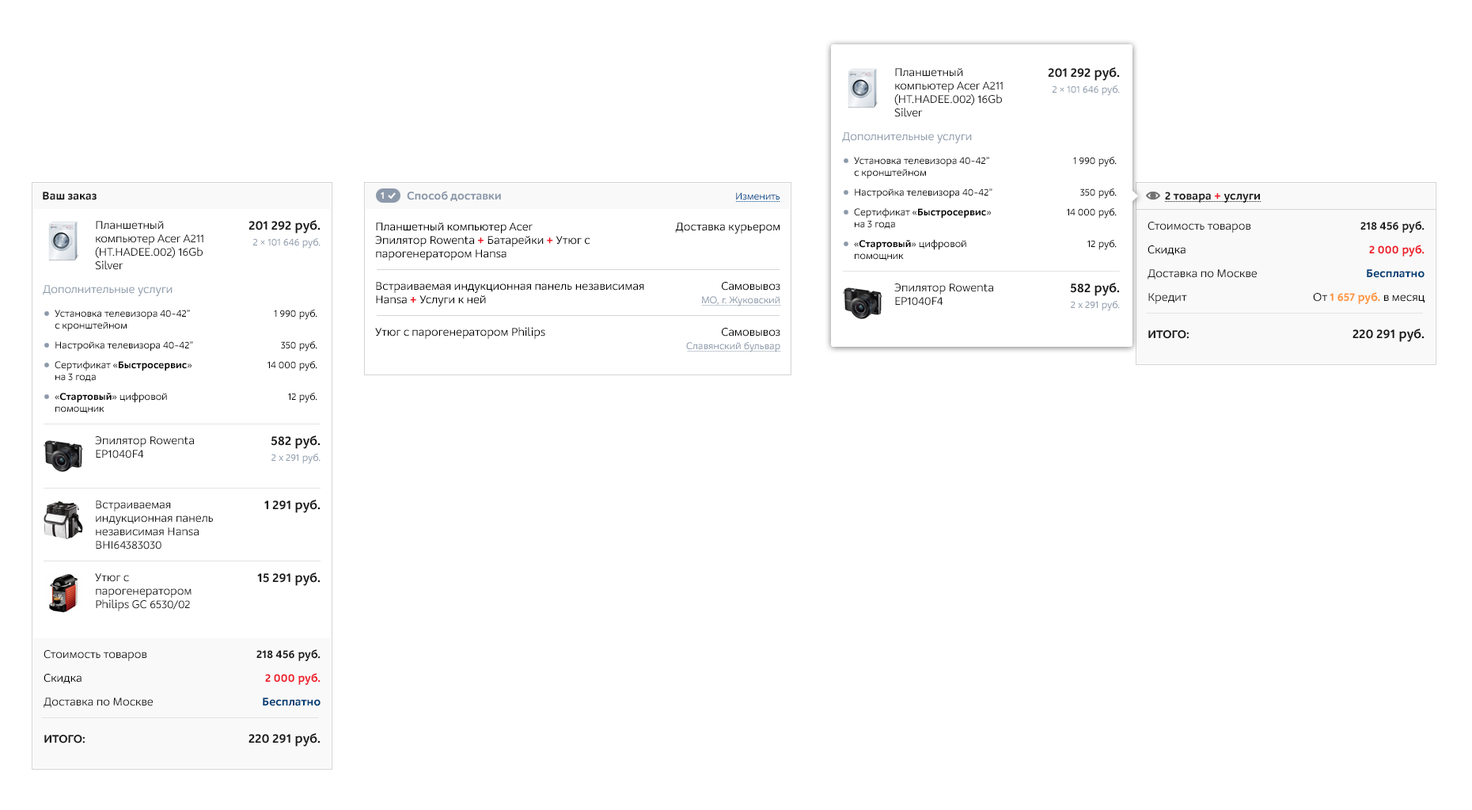
<style>
.page{position:relative;width:1472px;height:810px;background:#ffffff}
.page>*{position:absolute;margin:0}
.t1{font:11.9px/13.5px "M.Video-Regular";color:#1b1b1b}
.t2{font:13.5px "M.Video-Bold";color:#1b1b1b}
.t3{font:10.3px "M.Video-Regular";color:#8c99aa}
.t4{font:11.9px "M.Video-Regular";color:#8c99aa}
.t5{font:10.3px/11.9px "M.Video-Regular";color:#000000}
.t6{font:10.3px/11.9px "M.Video-Bold";color:#000000}
.t7{font:11.9px "M.Video-Bold";color:#1b1b1b}
.t8{font:10.3px "M.Video-Bold";color:#ffffff}
.t9{font:11.9px "M.Video-Bold";color:#8c99aa}
.t10{font:10.3px "M.Video-Regular";color:#004b8c}
.t11{font:11.9px "M.Video-Bold";color:#ed1c29}
.t12{font:11.9px/23.7px "M.Video-Regular";color:#1b1b1b}
.t13{font:11.9px/23.7px "M.Video-Regular";color:#000000}
.t14{font:11.9px/37.2px "M.Video-Bold";color:#1b1b1b}
.t15{font:11.9px/23.7px "M.Video-Bold";color:#1b1b1b}
.t16{font:11.9px/23.7px "M.Video-Bold";color:#ed1c29}
.t17{font:11.9px/23.7px "M.Video-Bold";color:#003e74}
.t18{font:11.9px/23.7px "M.Video-Bold";color:#ff953c}
.t19{font:13.5px/37.2px "M.Video-Bold";color:#1b1b1b}
.t20{font:11.9px/13.5px "M.Video-Regular";color:#000000}
.t21{font:11.9px/13.5px "M.Video-Bold";color:#ed1c29}
.t22{font:11.9px "M.Video-Regular";color:#000000}
</style>
<div class="page">
<p class="t1" style="left:895px;top:68px;width:108px;height:49px">Планшетный компьютер Acer A211 (HT.HADEE.002) 16Gb Silver</p>
<p class="t2" style="left:1048px;top:67px;width:72px;height:14px">201 292 руб.</p>
<p class="t3" style="left:1053px;top:85px;width:67px;height:11px">2 × 101 646 руб.</p>
<p class="t4" style="left:842px;top:132px;width:130px;height:11px">Дополнительные услуги</p>
<p class="t5" style="left:854px;top:157px;width:139px;height:103px">Установка телевизора 40-42”<br>с кронштейном<br>Настройка телевизора 40-42”<br>Сертификат «<span class="t6">Быстросервис</span>»<br>на 3 года<br>«<span class="t6">Стартовый</span>» цифровой<br>помощник</p>
<p class="t5" style="left:1067px;top:156px;width:50px;height:94px;text-align:right">1 990 руб.<br><br>350 руб.<br>14 000 руб.<br><br>12 руб.</p>
<p class="t7" style="left:43px;top:192px;width:54px;height:8px">Ваш заказ</p>
<p class="t8" style="left:381px;top:192px;width:3px;height:7px">1</p>
<p class="t9" style="left:407px;top:191px;width:94px;height:10px">Способ доставки</p>
<p class="t10" style="left:736px;top:192px;width:45px;height:8px">Изменить</p>
<p class="t7" style="left:1165px;top:192px;width:95px;height:11px">2 товара <span class="t11">+ </span>услуги</p>
<p class="t1" style="left:95px;top:221px;width:108px;height:49px">Планшетный компьютер Acer A211 (HT.HADEE.002) 16Gb Silver</p>
<p class="t2" style="left:249px;top:220px;width:72px;height:14px">201 292 руб.</p>
<p class="t12" style="left:1148px;top:222px;width:109px;height:117px">Стоимость товаров<br><span class="t13">Скидка<br></span>Доставка по Москве<br>Кредит<br><span class="t14">ИТОГО:</span></p>
<p class="t15" style="left:1313px;top:221px;width:112px;height:121px;text-align:right">218 456 руб.<br><span class="t16">2 000 руб.<br></span><span class="t17">Бесплатно<br></span><span class="t13">От </span><span class="t18">1 657 руб. </span><span class="t13">в месяц<br></span><span class="t19">220 291 руб.</span></p>
<p class="t20" style="left:375px;top:222px;width:216px;height:38px">Планшетный компьютер Acer<br>Эпилятор Rowenta <span class="t21">+</span> Батарейки <span class="t21">+</span> Утюг с<br>парогенератором Hansa</p>
<p class="t22" style="left:675px;top:222px;width:106px;height:12px">Доставка курьером</p>
<p class="t3" style="left:253px;top:237px;width:68px;height:12px">2 × 101 646 руб.</p>
<p class="t20" style="left:376px;top:282px;width:268px;height:24px">Встраиваемая индукционная панель независимая<br>Hansa <span class="t21">+</span> Услуги к ней</p>
<p class="t22" style="left:722px;top:282px;width:59px;height:9px">Самовывоз</p>
<p class="t4" style="left:43px;top:285px;width:130px;height:11px">Дополнительные услуги</p>
<p class="t1" style="left:895px;top:283px;width:98px;height:23px">Эпилятор Rowenta EP1040F4</p>
<p class="t2" style="left:1070px;top:283px;width:50px;height:13px">582 руб.</p>
<p class="t3" style="left:702px;top:296px;width:79px;height:10px">МО, г. Жуковский</p>
<p class="t3" style="left:1071px;top:300px;width:49px;height:11px">2 x 291 руб.</p>
<p class="t5" style="left:55px;top:310px;width:138px;height:103px">Установка телевизора 40-42”<br>с кронштейном<br>Настройка телевизора 40-42”<br>Сертификат «<span class="t6">Быстросервис</span>»<br>на 3 года<br>«<span class="t6">Стартовый</span>» цифровой<br>помощник</p>
<p class="t5" style="left:268px;top:309px;width:49px;height:94px;text-align:right">1 990 руб.<br><br>350 руб.<br>14 000 руб.<br><br>12 руб.</p>
<p class="t22" style="left:375px;top:327px;width:170px;height:12px">Утюг с парогенератором Philips</p>
<p class="t22" style="left:722px;top:328px;width:59px;height:8px">Самовывоз</p>
<p class="t3" style="left:686px;top:341px;width:95px;height:11px">Славянский бульвар</p>
<p class="t1" style="left:95px;top:436px;width:99px;height:22px">Эпилятор Rowenta EP1040F4</p>
<p class="t2" style="left:271px;top:435px;width:50px;height:14px">582 руб.</p>
<p class="t3" style="left:272px;top:453px;width:49px;height:11px">2 x 291 руб.</p>
<p class="t1" style="left:96px;top:500px;width:117px;height:49px">Встраиваемая индукционная панель независимая Hansa BHI64383030</p>
<p class="t2" style="left:264px;top:500px;width:57px;height:13px">1 291 руб.</p>
<p class="t1" style="left:95px;top:573px;width:97px;height:38px">Утюг с парогенератором Philips GC 6530/02</p>
<p class="t2" style="left:257px;top:572px;width:64px;height:14px">15 291 руб.</p>
<p class="t12" style="left:44px;top:650px;width:109px;height:93px">Стоимость товаров<br><span class="t13">Скидка<br></span>Доставка по Москве<br><span class="t14">ИТОГО:</span></p>
<p class="t15" style="left:249px;top:649px;width:72px;height:98px;text-align:right">218 456 руб.<br><span class="t16">2 000 руб.<br></span><span class="t17">Бесплатно<br></span><span class="t19">220 291 руб.</span></p>
</div>
